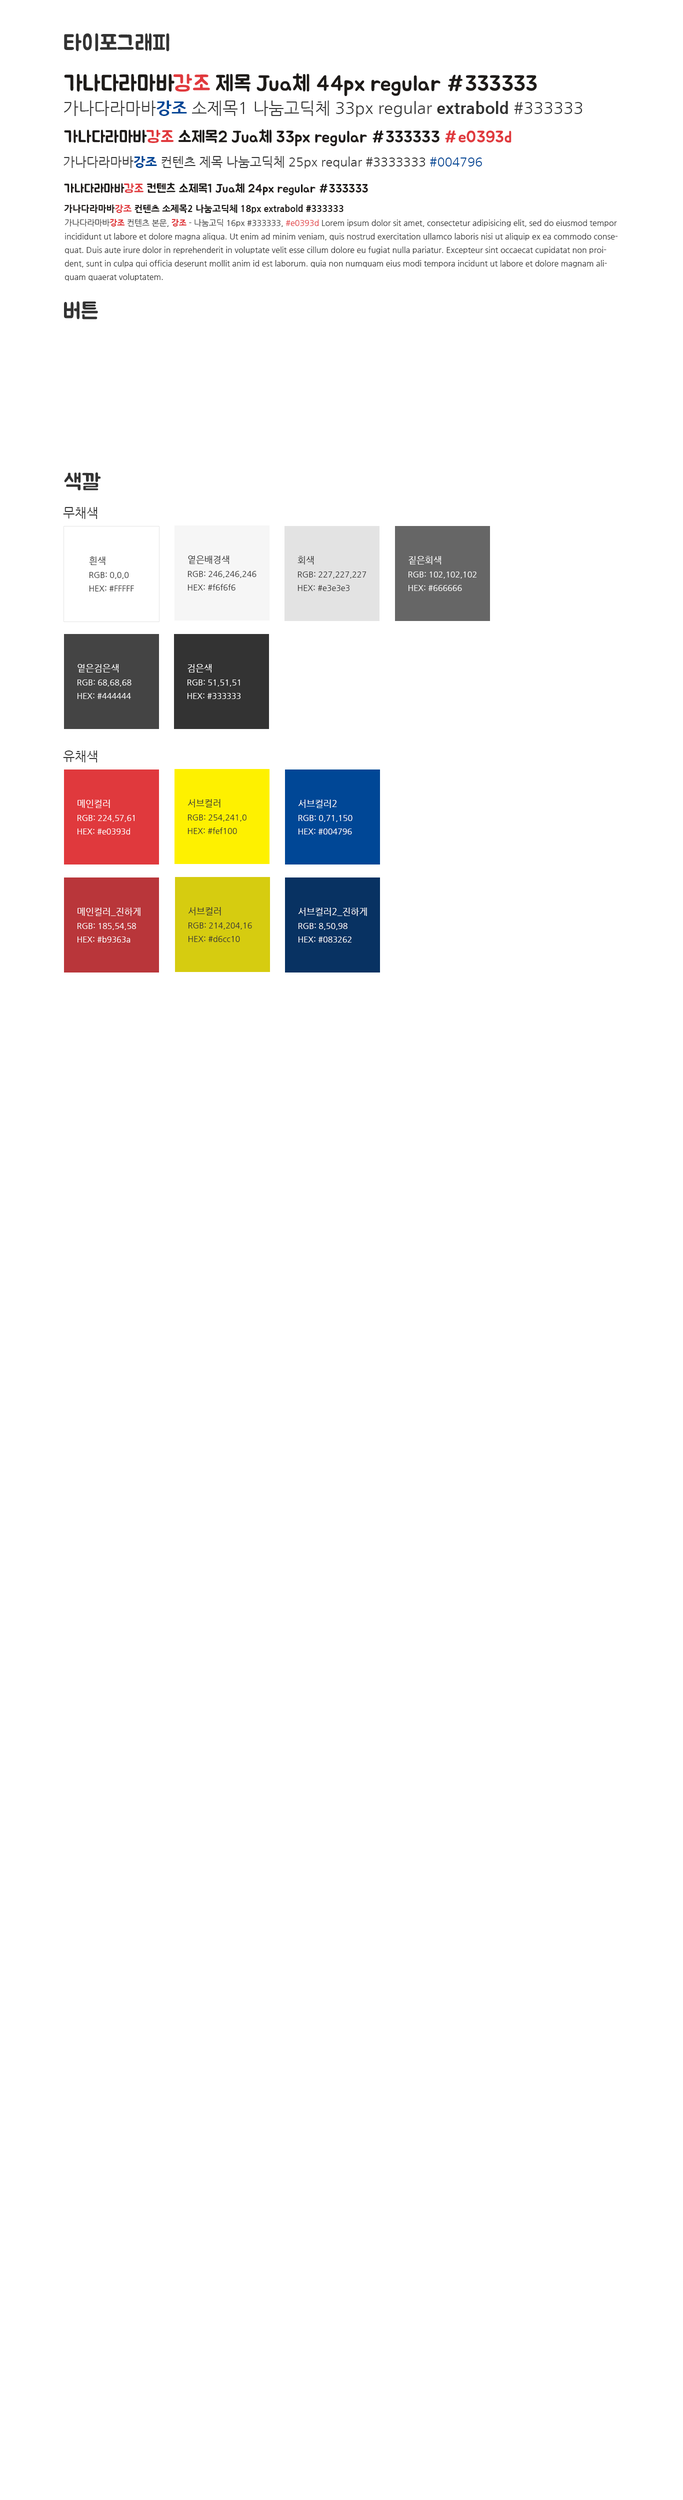
<style>
.page{position:relative;width:683px;height:2500px;background:#ffffff}
.page>*{position:absolute;margin:0}
.t1{font:22px "BMJUA";color:#333333}
.t2{font:22px "BMJUA";color:#1e1b19}
.t3{font:22px "BMJUA";color:#e0393d}
.t4{font:16.5px "NanumGothic";color:#333333}
.t5{font:16.5px "NanumGothicExtraBold";color:#004796}
.t6{font:16.5px "NanumGothicExtraBold";color:#333333}
.t7{font:16.5px "BMJUA";color:#1e1b19}
.t8{font:16.5px "BMJUA";color:#e0393d}
.t9{font:12.5px "NanumGothic";color:#333333}
.t10{font:12.5px "NanumGothicExtraBold";color:#004796}
.t11{font:12.5px "NanumGothic";color:#004796}
.t12{font:12px "BMJUA";color:#1e1b19}
.t13{font:12px "BMJUA";color:#e0393d}
.t14{font:9px "NanumGothicExtraBold";color:#1e1b19}
.t15{font:9px "NanumGothicExtraBold";color:#e0393d}
.t16{font:8px/13.5px "NanumGothic";color:#333333}
.t17{font:8px/13.5px "NanumGothicExtraBold";color:#e0393d}
.t18{font:8px/13.5px "NanumGothic";color:#e0393d}
.t19{font:9px "NanumGothic";color:#333333}
.t20{font:9px "NanumGothic";color:#ffffff}
.t21{font:8px/13.5px "NanumGothic";color:#ffffff}
</style>
<div class="page">
<p class="t1" style="left:64px;top:33px;width:106px;height:19px">타이포그래피</p>
<p class="t2" style="left:64px;top:73px;width:473px;height:23px">가나다라마바<span class="t3">강조</span> 제목 Jua체 44px regular #333333</p>
<p class="t4" style="left:64px;top:100px;width:518px;height:17px">가나다라마바<span class="t5">강조 </span>소제목1 나눔고딕체 33px regular <span class="t6">extrabold</span> #333333</p>
<p class="t7" style="left:64px;top:129px;width:448px;height:17px">가나다라마바<span class="t8">강조</span> 소제목2 Jua체 33px regular #333333 <span class="t8">#e0393d</span></p>
<p class="t9" style="left:64px;top:156px;width:418px;height:12px">가나다라마바<span class="t10">강조</span> 컨텐츠 제목 나눔고딕체 25px reqular #3333333 <span class="t11">#004796</span></p>
<p class="t12" style="left:64px;top:182px;width:304px;height:14px">가나다라마바<span class="t13">강조</span> 컨텐츠 소제목1 Jua체 24px regular #333333</p>
<p class="t14" style="left:64px;top:204px;width:280px;height:10px">가나다라마바<span class="t15">강조</span> 컨텐츠 소제목2 나눔고딕체 18px extrabold #333333</p>
<p class="t16" style="left:64px;top:219px;width:554px;height:62px">가나다라마바<span class="t17">강조</span> 컨텐츠 본문, <span class="t17">강조</span> - 나눔고딕 16px #333333, <span class="t18">#e0393d</span> Lorem ipsum dolor sit amet, consectetur adipisicing elit, sed do eiusmod tempor incididunt ut labore et dolore magna aliqua. Ut enim ad minim veniam, quis nostrud exercitation ullamco laboris nisi ut aliquip ex ea commodo consequat. Duis aute irure dolor in reprehenderit in voluptate velit esse cillum dolore eu fugiat nulla pariatur. Excepteur sint occaecat cupidatat non proident, sunt in culpa qui officia deserunt mollit anim id est laborum. quia non numquam eius modi tempora incidunt ut labore et dolore magnam aliquam quaerat voluptatem.</p>
<p class="t1" style="left:64px;top:301px;width:34px;height:19px">버튼</p>
<p class="t1" style="left:64px;top:472px;width:37px;height:18px">색깔</p>
<p class="t9" style="left:63px;top:507px;width:35px;height:12px">무채색</p>
<p class="t19" style="left:89px;top:556px;width:17px;height:9px">흰색</p>
<p class="t19" style="left:188px;top:556px;width:41px;height:8px">옅은배경색</p>
<p class="t19" style="left:298px;top:556px;width:16px;height:8px">회색</p>
<p class="t20" style="left:408px;top:556px;width:33px;height:8px">짙은회색</p>
<p class="t16" style="left:90px;top:572px;width:44px;height:20px">RGB: 0,0,0<br>HEX: #FFFFF</p>
<p class="t16" style="left:188px;top:571px;width:68px;height:19px">RGB: 246,246,246<br>HEX: #f6f6f6</p>
<p class="t16" style="left:298px;top:572px;width:68px;height:19px">RGB: 227,227,227<br>HEX: #e3e3e3</p>
<p class="t21" style="left:408px;top:572px;width:68px;height:19px">RGB: 102,102,102<br>HEX: #666666</p>
<p class="t20" style="left:78px;top:664px;width:40px;height:8px">옅은검은색</p>
<p class="t20" style="left:188px;top:664px;width:24px;height:8px">검은색</p>
<p class="t21" style="left:78px;top:680px;width:54px;height:19px">RGB: 68,68,68<br>HEX: #444444</p>
<p class="t21" style="left:188px;top:680px;width:52px;height:19px">RGB: 51,51,51<br>HEX: #333333</p>
<p class="t9" style="left:63px;top:750px;width:35px;height:12px">유채색</p>
<p class="t20" style="left:78px;top:800px;width:32px;height:8px">메인컬러</p>
<p class="t19" style="left:188px;top:799px;width:32px;height:9px">서브컬러</p>
<p class="t20" style="left:298px;top:800px;width:39px;height:8px">서브컬러2</p>
<p class="t21" style="left:78px;top:815px;width:56px;height:19px">RGB: 224,57,61<br>HEX: #e0393d</p>
<p class="t16" style="left:188px;top:814px;width:58px;height:20px">RGB: 254,241,0<br>HEX: #fef100</p>
<p class="t21" style="left:298px;top:815px;width:54px;height:19px">RGB: 0,71,150<br>HEX: #004796</p>
<p class="t20" style="left:78px;top:908px;width:62px;height:8px">메인컬러_진하게</p>
<p class="t19" style="left:188px;top:907px;width:33px;height:9px">서브컬러</p>
<p class="t20" style="left:298px;top:908px;width:69px;height:8px">서브컬러2_진하게</p>
<p class="t21" style="left:78px;top:923px;width:58px;height:19px">RGB: 185,54,58<br>HEX: #b9363a</p>
<p class="t16" style="left:188px;top:922px;width:64px;height:20px">RGB: 214,204,16<br>HEX: #d6cc10</p>
<p class="t21" style="left:298px;top:923px;width:54px;height:19px">RGB: 8,50,98<br>HEX: #083262</p>
</div>
